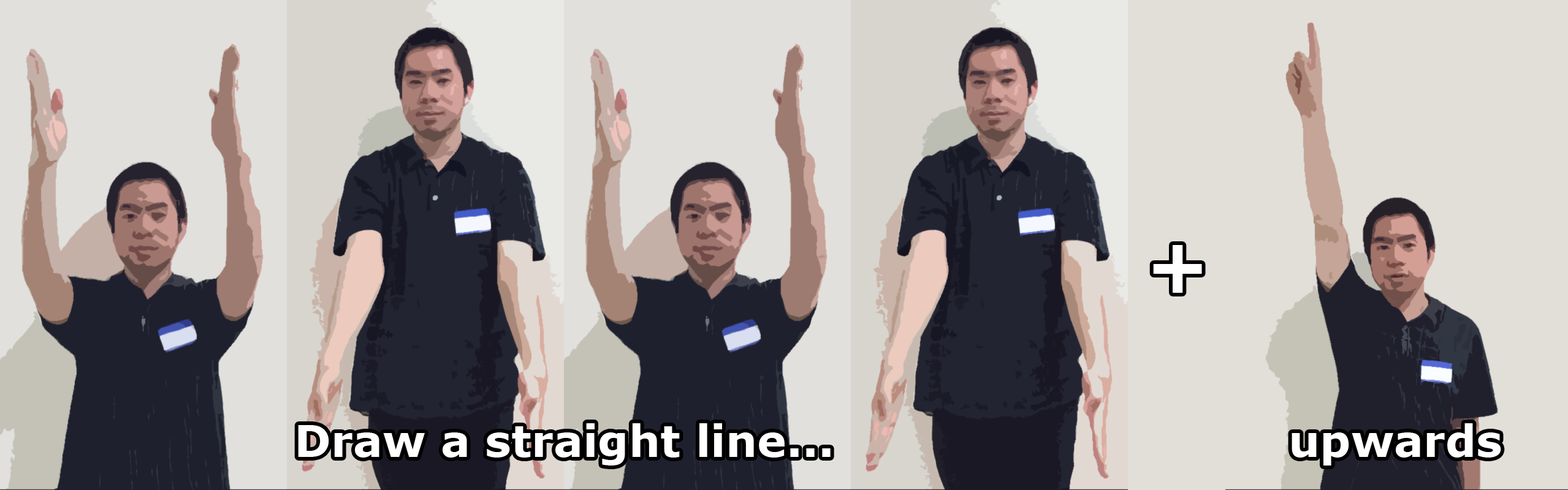
<style>
.page{position:relative;width:1568px;height:490px;background:#e2dfd9}
.page>*{position:absolute;margin:0}
.t1{font:73.6px "Verdana-Bold";color:#ffffff}
.t2{font:44.1px "Verdana-Bold";color:#ffffff}
</style>
<div class="page">
<p class="t1" style="left:1153px;top:245px;width:49px;height:48px">+</p>
<p class="t2" style="left:298px;top:424px;width:533px;height:42px">Draw a straight line...</p>
<p class="t2" style="left:1292px;top:424px;width:209px;height:42px">upwards</p>
</div>
